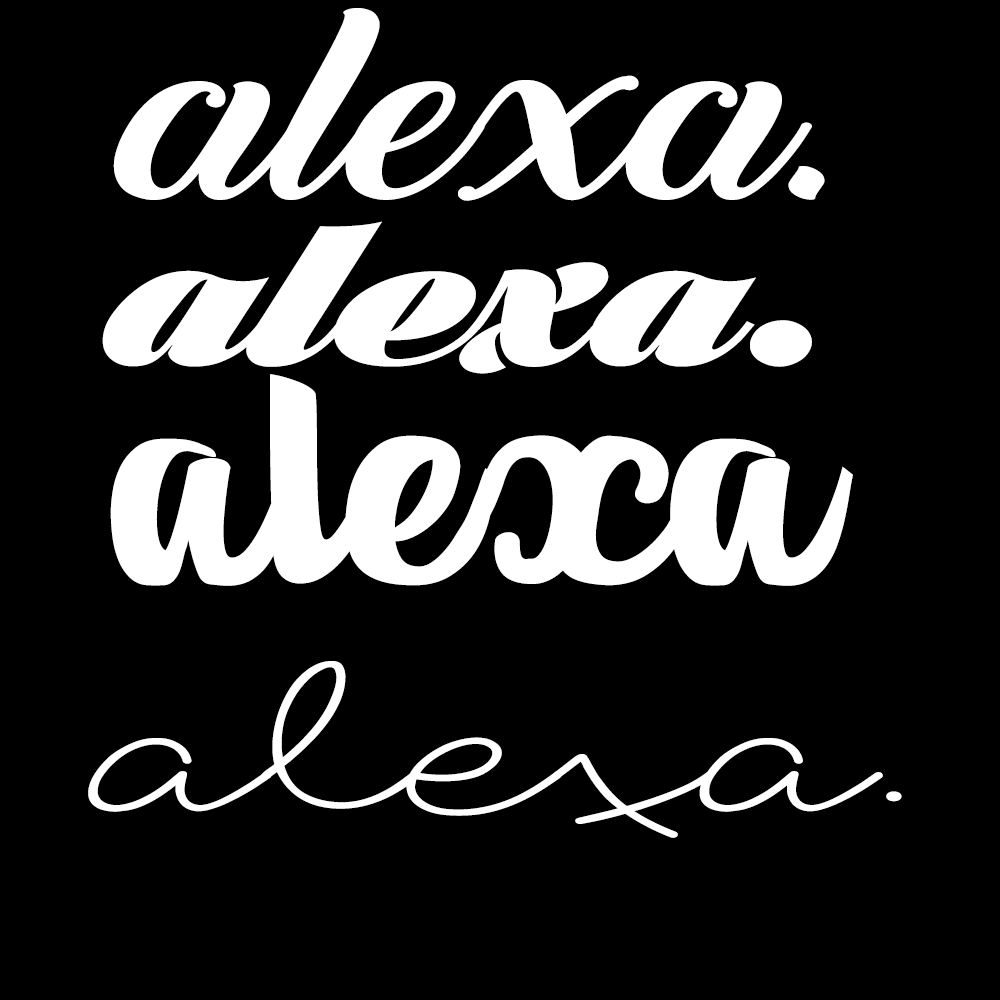
<style>
.page{position:relative;width:1000px;height:1000px;background:#000000}
.page>*{position:absolute;margin:0}
.t1{font:237.4px "BacktoBlackDemo";color:#ffffff;scale:1.3 1}
.t2{font:237.4px "BlackLarchPERSONALUSEONLY";color:#ffffff;scale:1.3 1}
.t3{font:418.2px "BananasPersonalUse";color:#ffffff;scale:1.44 1}
.t4{font:208.1px "foxinthesnow";color:#ffffff;scale:1.44 1}
</style>
<div class="page">
<p class="t1" style="left:113px;top:8px;width:712px;height:193px">alexa.</p>
<p class="t2" style="left:102px;top:221px;width:710px;height:153px">alexa.</p>
<p class="t3" style="left:110px;top:374px;width:743px;height:212px">alexa</p>
<p class="t4" style="left:88px;top:661px;width:814px;height:177px">alexa.</p>
</div>
